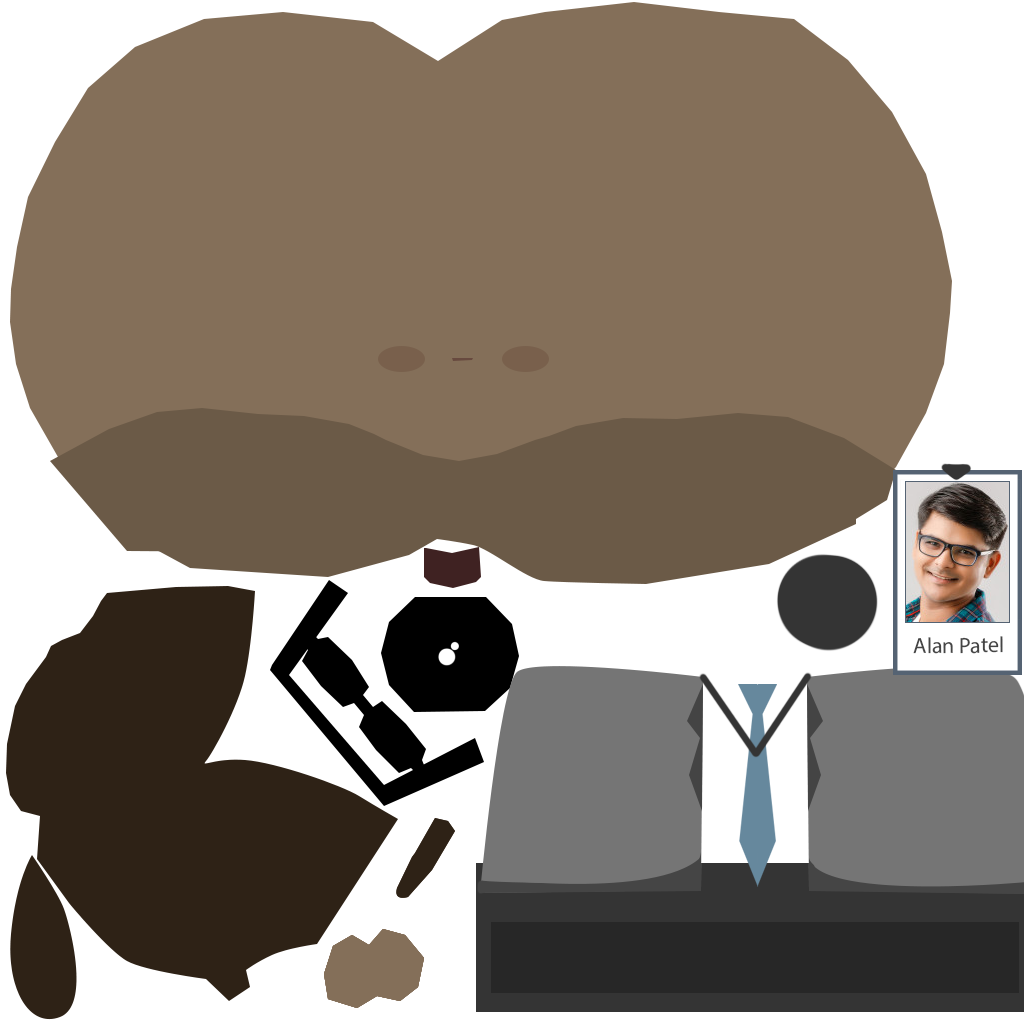
<style>
.page{position:relative;width:1024px;height:1024px;background:#846f59}
.page>*{position:absolute;margin:0}
.t1{font:22px "MyriadPro-Regular";color:#454545}
</style>
<div class="page">
<p class="t1" style="left:913px;top:636px;width:90px;height:18px">Alan Patel</p>
</div>
